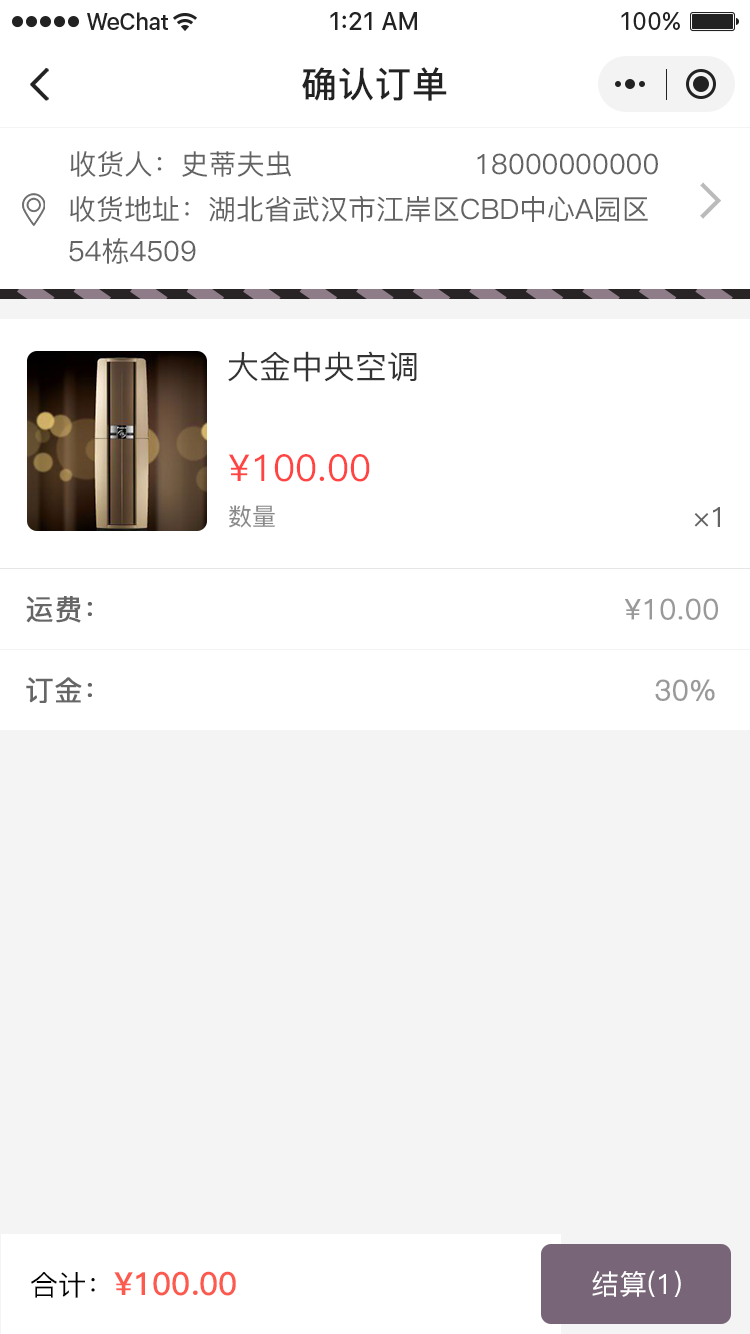
<style>
.page{position:relative;width:750px;height:1334px;background:#ffffff}
.page>*{position:absolute;margin:0}
.t1{font:36px "PingFang-SC-Bold";letter-spacing:0.028em;color:#222222}
.t2{font:28px "PingFang-SC-Medium";color:#636363;text-transform:uppercase}
.t3{font:28px/42px "PingFang-SC-Medium";color:#636363;text-transform:uppercase}
.t4{font:32px "PingFang-SC-Medium";color:#333333;text-transform:uppercase}
.t5{font:37px "PingFang-SC-Medium";color:#ff4444;text-transform:uppercase}
.t6{font:24px "PingFang-SC-Medium";color:#888888;text-transform:uppercase}
.t7{font:28px "PingFang-SC-Medium";color:#666666;font-weight:bold}
.t8{font:28px "PingFang-SC-Regular";color:#999999;font-weight:bold}
.t9{font:32px "PingFang-SC-Bold";color:#fc5a4f}
.t10{font:28px "PingFang-SC-Medium";color:#000000}
.t11{font:28px "PingFang-SC-Medium";color:#ffffff}
</style>
<div class="page">
<p class="t1" style="left:302px;top:67px;width:145px;height:34px">确认订单</p>
<p class="t2" style="left:70px;top:151px;width:221px;height:26px">收货人：史蒂夫虫</p>
<p class="t2" style="left:477px;top:153px;width:181px;height:22px">18000000000</p>
<p class="t3" style="left:69px;top:195px;width:579px;height:69px">收货地址：湖北省武汉市江岸区CBD中心A园区<br>54栋4509</p>
<p class="t4" style="left:228px;top:351px;width:189px;height:31px">大金中央空调</p>
<p class="t5" style="left:229px;top:454px;width:141px;height:28px">¥100.00</p>
<p class="t6" style="left:229px;top:505px;width:46px;height:23px">数量</p>
<p class="t2" style="left:694px;top:507px;width:26px;height:20px">×1</p>
<p class="t7" style="left:26px;top:596px;width:66px;height:27px">运费：</p>
<p class="t8" style="left:625px;top:598px;width:93px;height:22px">¥10.00</p>
<p class="t7" style="left:26px;top:677px;width:66px;height:26px">订金：</p>
<p class="t8" style="left:655px;top:679px;width:60px;height:23px">30%</p>
<p class="t9" style="left:30px;top:1271px;width:206px;height:27px"><span class="t10">合计：</span>¥100.00</p>
<p class="t11" style="left:592px;top:1270px;width:89px;height:27px">结算(1)</p>
</div>
